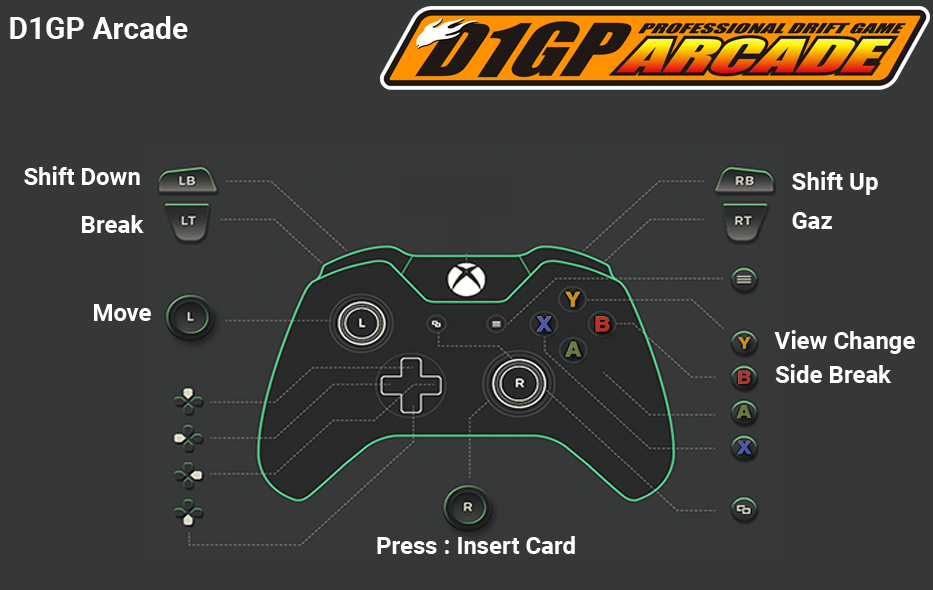
<style>
.page{position:relative;width:933px;height:590px;background:#363838}
.page>*{position:absolute;margin:0}
.t1{font:30px "Roboto-Bold";color:#ffffff}
.t2{font:24px "Roboto-Bold";color:#ffffff}
</style>
<div class="page">
<p class="t1" style="left:10px;top:16px;width:178px;height:23px">D1GP Arcade</p>
<p class="t2" style="left:24px;top:166px;width:116px;height:19px">Shift Down</p>
<p class="t2" style="left:792px;top:171px;width:86px;height:24px">Shift Up</p>
<p class="t2" style="left:82px;top:215px;width:62px;height:18px">Break</p>
<p class="t2" style="left:792px;top:212px;width:40px;height:17px">Gaz</p>
<p class="t2" style="left:94px;top:304px;width:57px;height:17px">Move</p>
<p class="t2" style="left:774px;top:330px;width:141px;height:24px">View Change</p>
<p class="t2" style="left:775px;top:364px;width:117px;height:19px">Side Break</p>
<p class="t2" style="left:377px;top:536px;width:198px;height:18px">Press : Insert Card</p>
</div>
